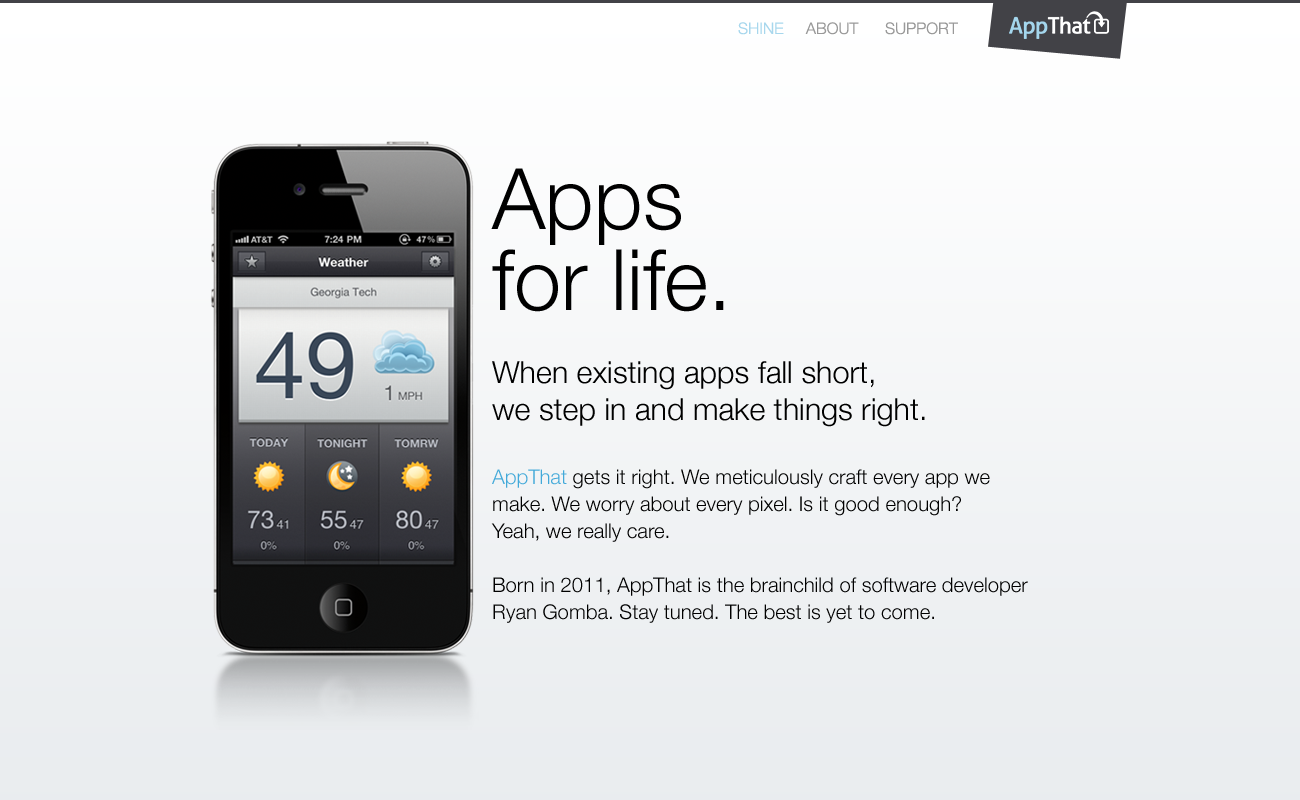
<style>
.page{position:relative;width:1300px;height:800px}
.page>*{position:absolute;margin:0}
.t1{font:16px "HelveticaNeue-Light";color:#999999}
.t2{font:16px "HelveticaNeue-Light";color:#a7d7ed}
.t3{font:20.3px/27.1px "HelveticaNeue-Light";color:#000000}
.t4{font:84.7px/81.3px "HelveticaNeue-Light";color:#000000}
.t5{font:30.5px "HelveticaNeue-Light";color:#000000}
.t6{font:20.3px/27.1px "HelveticaNeue-Light";color:#42a9d9}
</style>
<div class="page">
<p class="t1" style="left:738px;top:22px;width:220px;height:13px"><span class="t2">SHINE</span>     ABOUT      SUPPORT</p>
<p class="t3" style="left:491px;top:168px;width:537px;height:455px"><span class="t4">Apps<br>for life.<br></span><span class="t5"><br>When existing apps fall short,<br>we step in and make things right.<br><br></span><span class="t6">AppThat</span> gets it right. We meticulously craft every app we<br>make. We worry about every pixel. Is it good enough?<br>Yeah, we really care.<br><br>Born in 2011, AppThat is the brainchild of software developer<br>Ryan Gomba. Stay tuned. The best is yet to come.</p>
</div>
